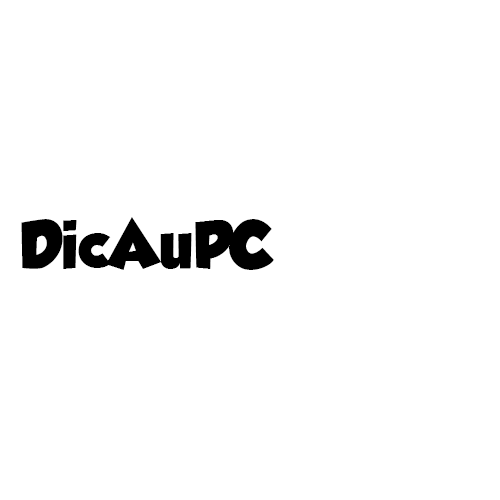
<style>
.page{position:relative;width:500px;height:500px;background:#ffffff}
.page>*{position:absolute;margin:0}
.t1{font:58px "GROBOLD";color:#000000}
</style>
<div class="page">
<p class="t1" style="left:21px;top:217px;width:253px;height:53px">DicAuPC</p>
</div>
